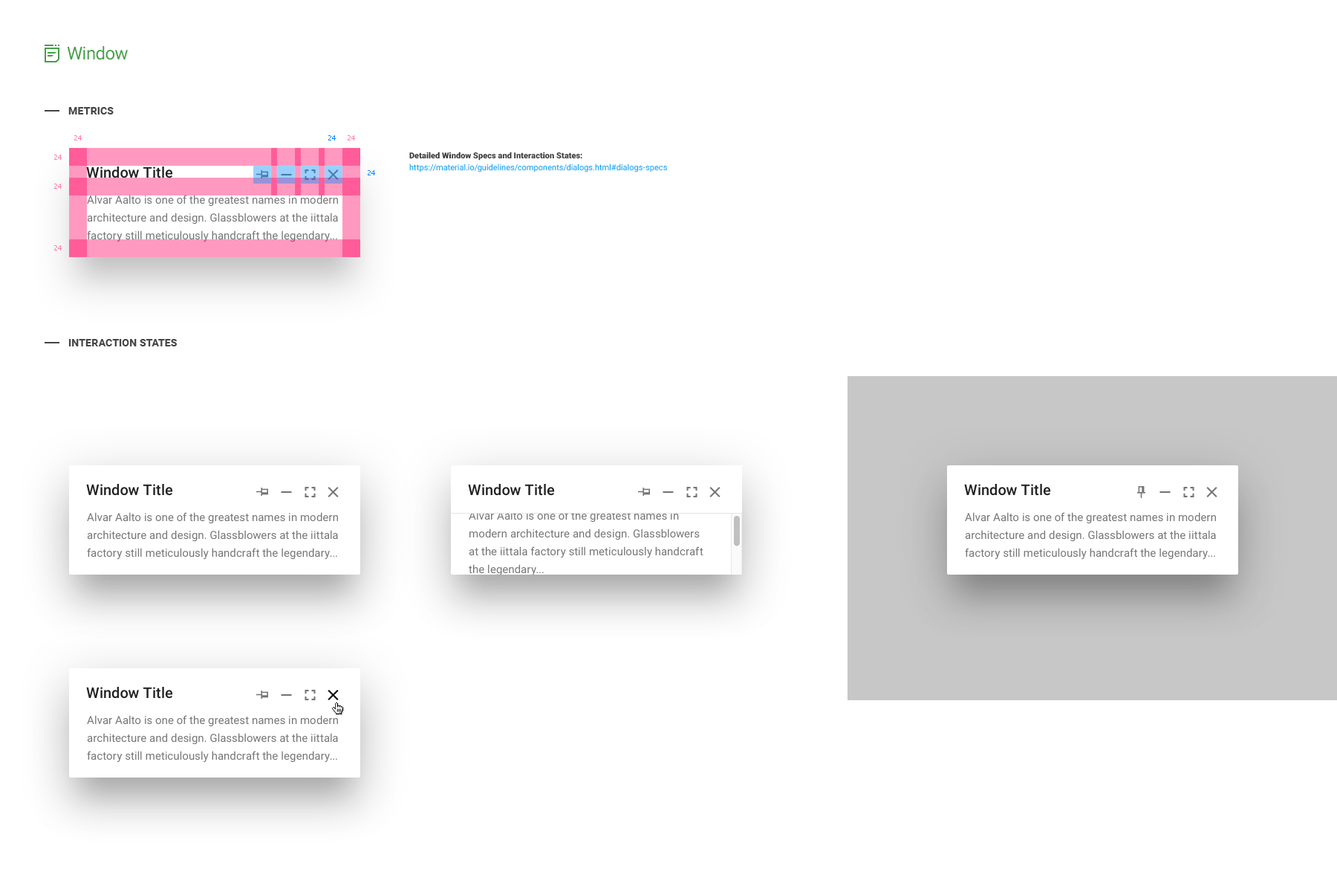
<style>
.page{position:relative;width:1337px;height:892px;background:#ffffff}
.page>*{position:absolute;margin:0}
.t1{font:17.8px "Roboto-Regular";letter-spacing:-0.025em;color:#43a047}
.t2{font:10.4px "Roboto-Bold";letter-spacing:0.01em;color:#454545;text-transform:uppercase}
.t3{font:6.7px "Tahoma";color:#ff7cae}
.t4{font:6.7px "Tahoma";color:#008aff}
.t5{font:8.2px/11.9px "Roboto-Regular";color:#03a9f4}
.t6{font:8.2px/11.9px "Roboto-Black";color:#383838}
.t7{font:14.9px "Roboto-Medium";letter-spacing:0.005em;color:#212121}
.t8{font:11.1px/17.8px "Roboto-Regular";letter-spacing:0.005em;color:#757575}
</style>
<div class="page">
<p class="t1" style="left:67px;top:46px;width:61px;height:14px">Window</p>
<p class="t2" style="left:68px;top:107px;width:46px;height:7px">Metrics</p>
<p class="t3" style="left:74px;top:135px;width:8px;height:5px">24</p>
<p class="t4" style="left:328px;top:135px;width:8px;height:5px">24</p>
<p class="t3" style="left:348px;top:135px;width:7px;height:5px">24</p>
<p class="t3" style="left:54px;top:155px;width:8px;height:5px">24</p>
<p class="t5" style="left:409px;top:152px;width:258px;height:20px"><span class="t6">Detailed Window Specs and Interaction States:<br></span>https://material.io/guidelines/components/dialogs.html#dialogs-specs</p>
<p class="t7" style="left:86px;top:166px;width:87px;height:12px">Window Title</p>
<p class="t4" style="left:368px;top:170px;width:7px;height:5px">24</p>
<p class="t3" style="left:54px;top:184px;width:8px;height:5px">24</p>
<p class="t8" style="left:87px;top:195px;width:251px;height:47px">Alvar Aalto is one of the greatest names in modern architecture and design. Glassblowers at the iittala factory still meticulously handcraft the legendary...</p>
<p class="t3" style="left:54px;top:245px;width:8px;height:5px">24</p>
<p class="t2" style="left:68px;top:339px;width:109px;height:7px">Interaction states</p>
<p class="t7" style="left:86px;top:484px;width:87px;height:12px">Window Title</p>
<p class="t7" style="left:468px;top:484px;width:87px;height:12px">Window Title</p>
<p class="t7" style="left:964px;top:484px;width:87px;height:12px">Window Title</p>
<p class="t8" style="left:87px;top:512px;width:251px;height:47px">Alvar Aalto is one of the greatest names in modern architecture and design. Glassblowers at the iittala factory still meticulously handcraft the legendary...</p>
<p class="t8" style="left:469px;top:510px;width:235px;height:66px">Alvar Aalto is one of the greatest names in modern architecture and design. Glassblowers at the iittala factory still meticulously handcraft the legendary...</p>
<p class="t8" style="left:965px;top:512px;width:251px;height:47px">Alvar Aalto is one of the greatest names in modern architecture and design. Glassblowers at the iittala factory still meticulously handcraft the legendary...</p>
<p class="t7" style="left:86px;top:687px;width:87px;height:11px">Window Title</p>
<p class="t8" style="left:87px;top:715px;width:251px;height:47px">Alvar Aalto is one of the greatest names in modern architecture and design. Glassblowers at the iittala factory still meticulously handcraft the legendary...</p>
</div>
